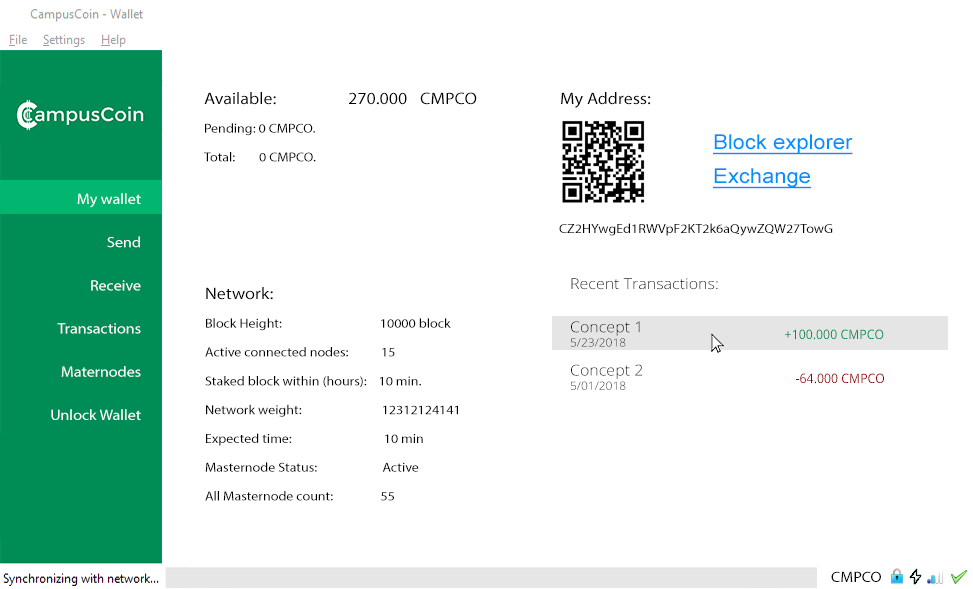
<style>
.page{position:relative;width:973px;height:589px;background:#ffffff}
.page>*{position:absolute;margin:0}
.t1{font:13px/14.4px "MyriadPro-Regular";color:#000000;scale:1.08 1}
.t2{font:16.7px/14.4px "MyriadPro-Regular";color:#000000;scale:1.08 1}
.t3{font:16.7px "MyriadPro-Regular";color:#000000;scale:1.08 1}
.t4{font:20.5px "ArialMT";color:#0090ff;text-decoration:underline;scale:1.08 1}
.t5{font:14.9px/14.4px "MyriadPro-Regular";color:#ffffff;scale:1.08 1}
.t6{font:13px "MyriadPro-Regular";color:#000000;scale:1.08 1}
.t7{font:14.9px/14.4px "OpenSans-Light";color:#000000;scale:1.08 1}
.t8{font:11.2px/14.4px "OpenSans-Light";color:#000000;scale:1.08 1}
.t9{font:13px "OpenSans-Regular";color:#008d55;scale:0.95 1}
.t10{font:13px "OpenSans-Regular";color:#970000;scale:0.95 1}
.t11{font:14.9px "MyriadPro-Regular";color:#000000;scale:1.08 1}
</style>
<div class="page">
<p class="t1" style="left:204px;top:92px;width:273px;height:70px"><span class="t2">Available:  270.000  CMPCO<br><br></span>Pending: 0 CMPCO.<br><br>Total:        0 CMPCO.</p>
<p class="t3" style="left:561px;top:92px;width:90px;height:16px">My Address:</p>
<p class="t4" style="left:713px;top:134px;width:140px;height:21px">Block explorer</p>
<p class="t4" style="left:713px;top:168px;width:98px;height:21px">Exchange</p>
<p class="t5" style="left:51px;top:193px;width:90px;height:227px;text-align:right">My wallet<br><br><br>Send<br><br><br>Receive<br><br><br>Transactions<br><br><br>Maternodes<br><br><br>Unlock Wallet</p>
<p class="t6" style="left:559px;top:223px;width:274px;height:13px">CZ2HYwgEd1RWVpF2KT2k6aQywZQW27TowG</p>
<p class="t7" style="left:570px;top:278px;width:148px;height:112px">Recent Transactions:<br><br><br>Concept 1     <br><span class="t8">5/23/2018 <br><br></span>Concept 2     <br><span class="t8">5/01/2018</span></p>
<p class="t1" style="left:205px;top:287px;width:253px;height:214px"><span class="t2">Network:<br><br></span>Block Height:                                 10000 block     <br><br>Active connected nodes:           15<br><br>Staked block within (hours):    10 min.<br><br>Network weight:                           12312124141<br><br>Expected time:                               10 min<br><br>Masternode Status:                      Active <br><br>All Masternode count:                55</p>
<p class="t9" style="left:785px;top:329px;width:99px;height:11px">+100.000 CMPCO</p>
<p class="t10" style="left:796px;top:373px;width:88px;height:11px">-64.000 CMPCO</p>
<p class="t11" style="left:831px;top:571px;width:50px;height:11px">CMPCO</p>
</div>
